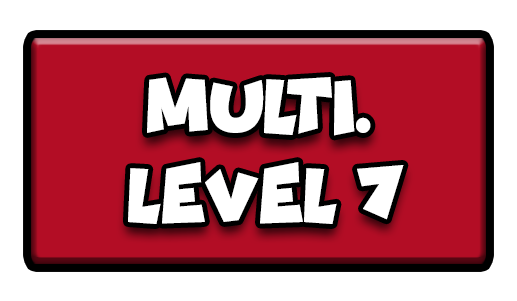
<style>
.page{position:relative;width:517px;height:301px;background:#ffffff}
.page>*{position:absolute;margin:0}
.t1{font:77.7px "Funhouse";color:#ffffff;scale:0.95 1}
</style>
<div class="page">
<p class="t1" style="left:147px;top:77px;width:224px;height:59px">MULTI.</p>
<p class="t1" style="left:128px;top:162px;width:276px;height:62px">LEVEL 7</p>
</div>
